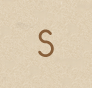
<style>
.page{position:relative;width:92px;height:88px}
.page>*{position:absolute;margin:0}
.t1{font:44px "Eurofurenceregular";color:#875f3a}
</style>
<div class="page">
<p class="t1" style="left:38px;top:29px;width:16px;height:28px">S</p>
</div>
